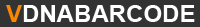
<style>
.page{position:relative;width:200px;height:27px;background:#333333}
.page>*{position:absolute;margin:0}
.t1{font:24px "Arial-BoldMT";color:#ffffff}
.t2{font:24px "Arial-BoldMT";color:#f98700}
</style>
<div class="page">
<p class="t1" style="left:6px;top:5px;width:189px;height:17px"><span class="t2">V</span>DNABARCODE</p>
</div>
